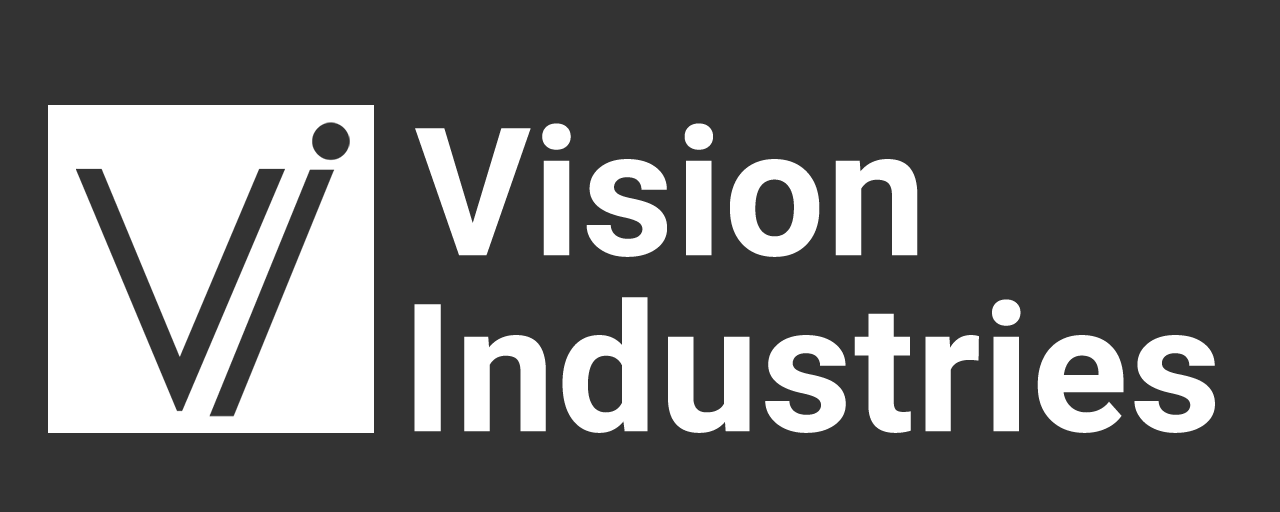
<style>
.page{position:relative;width:1280px;height:512px;background:#333333}
.page>*{position:absolute;margin:0}
.t1{font:178.2px "Roboto-Bold";letter-spacing:0.01em;color:#ffffff}
</style>
<div class="page">
<p class="t1" style="left:415px;top:123px;width:503px;height:134px">Vision</p>
<p class="t1" style="left:414px;top:297px;width:801px;height:136px">Industries</p>
</div>
